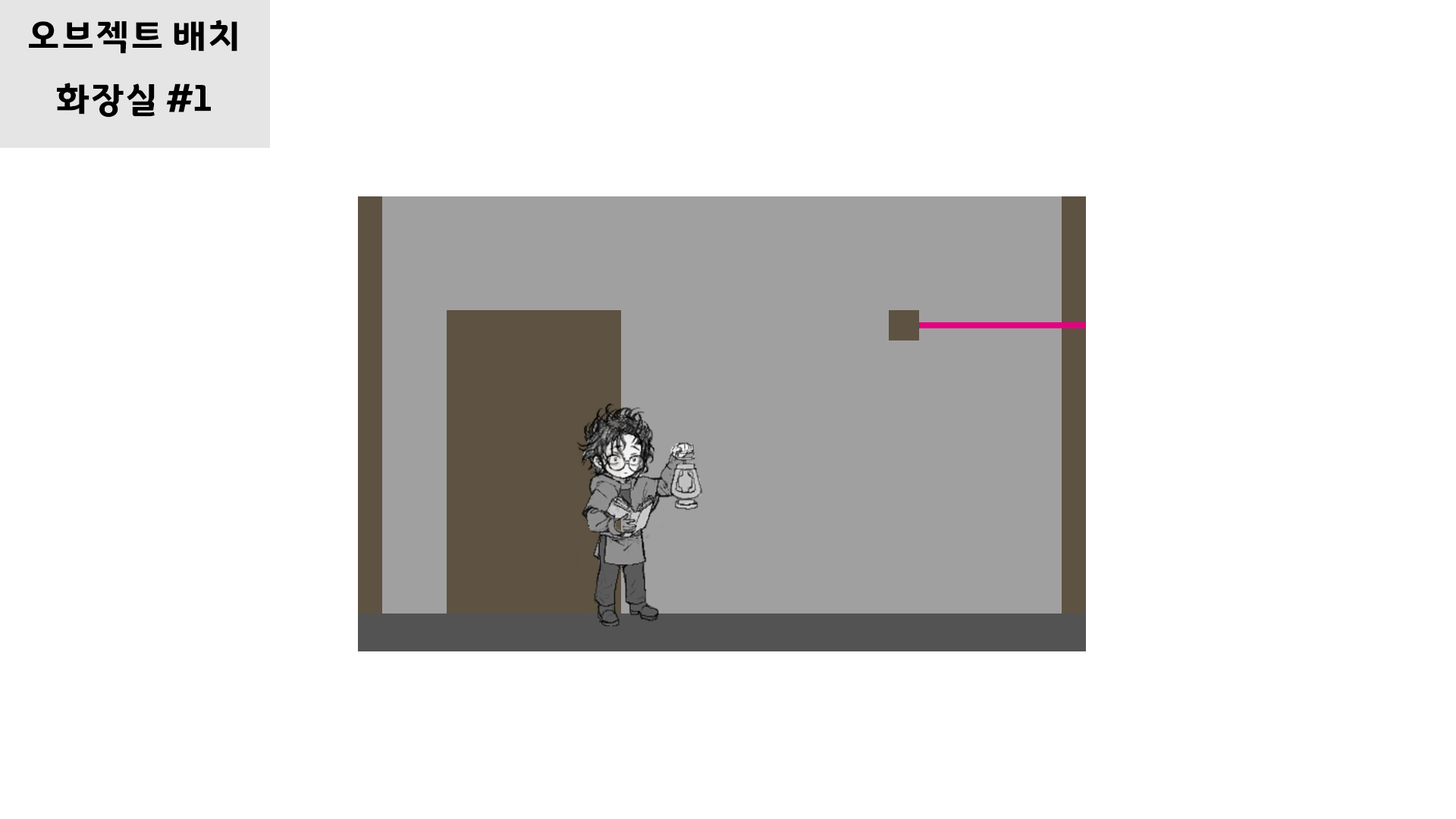
<style>
.page{position:relative;width:1456px;height:819px;background:#ffffff}
.page>*{position:absolute;margin:0}
.t1{font:36.4px "GyeonggiTitleV";letter-spacing:-0.05em;color:#000000}
</style>
<div class="page">
<p class="t1" style="left:29px;top:20px;width:208px;height:34px">오브젝트 배치</p>
<p class="t1" style="left:57px;top:83px;width:154px;height:35px">화장실 #1</p>
</div>
